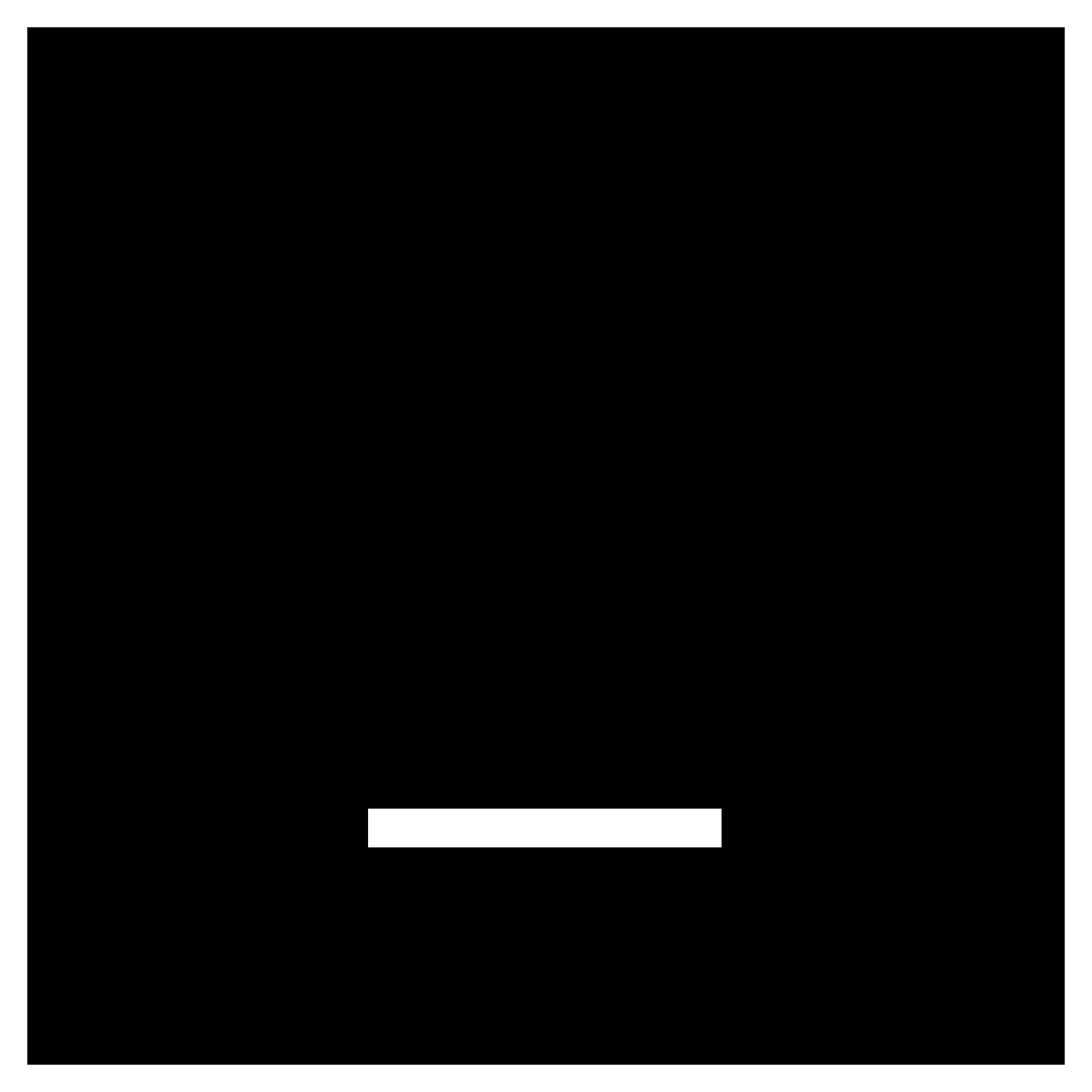
<style>
.page{position:relative;width:1092px;height:1092px;background:#000000}
.page>*{position:absolute;margin:0}
.t1{font:606.7px "ArialMT";color:#ffffff}
</style>
<div class="page">
<p class="t1" style="left:368px;top:809px;width:354px;height:38px">_</p>
</div>
